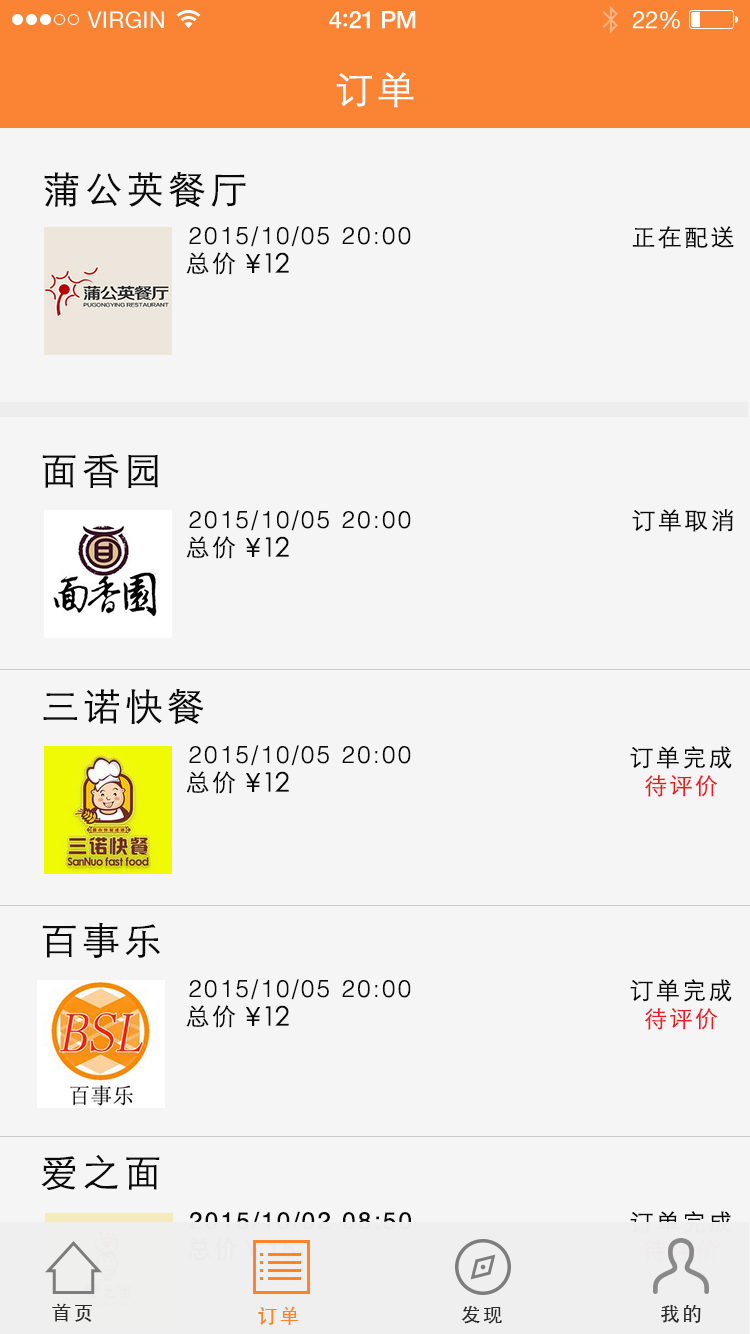
<style>
.page{position:relative;width:750px;height:1334px;background:#f6f5f5}
.page>*{position:absolute;margin:0}
.t1{font:23px "HelveticaNeue";letter-spacing:0.02em;color:#ffffff}
.t2{font:24px "HelveticaNeue-Medium";letter-spacing:-0.02em;color:#ffffff}
.t3{font:26px "Avenir-Medium";letter-spacing:-0.02em;color:#ffffff}
.t4{font:24px "HelveticaNeue";letter-spacing:-0.02em;color:#ffffff}
.t5{font:38px "STXihei";letter-spacing:0.1em;color:#ffffff}
.t6{font:38px "STXihei";letter-spacing:0.1em;color:#0a0a0a}
.t7{font:24px/14px "Helvetica-Light";letter-spacing:0.1em;color:#0a0a0a}
.t8{font:24px/14px "STXihei";letter-spacing:0.1em;color:#0a0a0a}
.t9{font:24px "STXihei";letter-spacing:0.1em;color:#0a0a0a}
.t10{font:27px "STXihei";letter-spacing:-0.075em;color:#0a0a0a}
.t11{font:23px/14px "STXihei";letter-spacing:0.1em;color:#e81e1e}
.t12{font:24px/14px "Helvetica";letter-spacing:0.1em}
.t13{font:24px/14px "SIL-Hei-Med-Jian";letter-spacing:0.1em}
.t14{font:24px/14px "STXihei";letter-spacing:0.1em}
.t15{font:20px "STHeiti";letter-spacing:0.1em;color:#2b2a2a}
.t16{font:19px "STHeiti";letter-spacing:0.1em;color:#2b2a2a}
.t17{font:20px "STHeiti";letter-spacing:0.1em;color:#ff8427}
</style>
<div class="page">
<p class="t1" style="left:87px;top:11px;width:77px;height:18px">VIRGIN</p>
<p class="t2" style="left:329px;top:11px;width:87px;height:18px">4<span class="t3">:</span>21 PM</p>
<p class="t4" style="left:632px;top:11px;width:48px;height:18px">22%</p>
<p class="t5" style="left:336px;top:72px;width:78px;height:36px">订单</p>
<p class="t6" style="left:44px;top:171px;width:202px;height:37px">蒲公英餐厅</p>
<p class="t7" style="left:186px;top:226px;width:225px;height:49px;text-align:center">2015/10/05 20:00<br><br>    <span class="t8">总价</span></p>
<p class="t9" style="left:632px;top:226px;width:102px;height:23px">正在配送</p>
<p class="t10" style="left:246px;top:254px;width:14px;height:19px">￥</p>
<p class="t10" style="left:265px;top:252px;width:24px;height:21px">12</p>
<p class="t6" style="left:42px;top:454px;width:116px;height:34px">面香园</p>
<p class="t7" style="left:186px;top:510px;width:225px;height:49px;text-align:center">2015/10/05 20:00<br><br>    <span class="t8">总价</span></p>
<p class="t9" style="left:632px;top:509px;width:101px;height:23px">订单取消</p>
<p class="t10" style="left:246px;top:538px;width:14px;height:19px">￥</p>
<p class="t10" style="left:265px;top:536px;width:24px;height:21px">12</p>
<p class="t6" style="left:43px;top:688px;width:161px;height:37px">三诺快餐</p>
<p class="t7" style="left:186px;top:745px;width:225px;height:49px;text-align:center">2015/10/05 20:00<br><br>    <span class="t8">总价</span></p>
<p class="t8" style="left:630px;top:746px;width:102px;height:51px;text-align:center">订单完成<br><br><span class="t11">待评价</span></p>
<p class="t10" style="left:246px;top:773px;width:14px;height:19px">￥</p>
<p class="t10" style="left:265px;top:771px;width:24px;height:21px">12</p>
<p class="t6" style="left:42px;top:922px;width:118px;height:36px">百事乐</p>
<p class="t7" style="left:186px;top:979px;width:225px;height:49px;text-align:center">2015/10/05 20:00<br><br>    <span class="t8">总价</span></p>
<p class="t8" style="left:630px;top:979px;width:102px;height:51px;text-align:center">订单完成<br><br><span class="t11">待评价</span></p>
<p class="t10" style="left:246px;top:1007px;width:14px;height:19px">￥</p>
<p class="t10" style="left:265px;top:1005px;width:24px;height:21px">12</p>
<p class="t6" style="left:41px;top:1155px;width:119px;height:35px">爱之面</p>
<p class="t12" style="left:188px;top:1211px;width:223px;height:50px;text-align:center">2015/10/02 08:50<br><br>   <span class="t13">总价￥</span>15</p>
<p class="t14" style="left:630px;top:1211px;width:102px;height:51px;text-align:center">订单完成<br><br>待评价</p>
<p class="t15" style="left:52px;top:1303px;width:40px;height:19px"><span class="t16"><br></span>首页</p>
<p class="t17" style="left:258px;top:1306px;width:41px;height:19px">订单</p>
<p class="t15" style="left:461px;top:1306px;width:41px;height:18px">发现</p>
<p class="t15" style="left:661px;top:1304px;width:40px;height:19px">我的</p>
</div>
